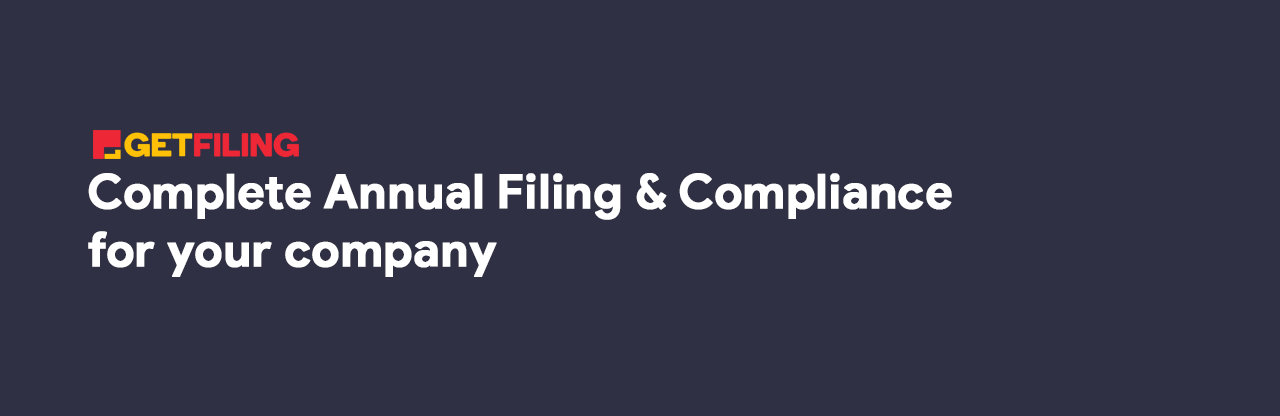
<style>
.page{position:relative;width:1280px;height:416px;background:#2f3043}
.page>*{position:absolute;margin:0}
.t1{font:48px "ProductSans-Bold";color:#ffffff;font-weight:bold}
</style>
<div class="page">
<p class="t1" style="left:88px;top:173px;width:864px;height:104px;text-align:right">Complete Annual Filing &amp; Compliance <br>for your company</p>
</div>
